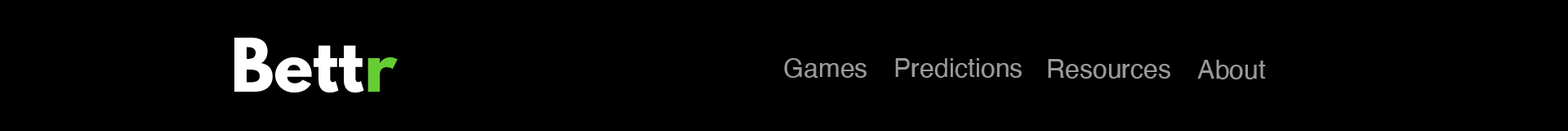
<style>
.page{position:relative;width:1568px;height:131px;background:#000000}
.page>*{position:absolute;margin:0}
.t1{font:65.3px "LeagueSpartan-Bold";color:#ffffff}
.t2{font:65.3px "LeagueSpartan-Bold";color:#66cc33}
.t3{font:26.1px "Helvetica";color:#999999}
</style>
<div class="page">
<p class="t1" style="left:234px;top:38px;width:164px;height:54px">Bett<span class="t2">r</span></p>
<p class="t3" style="left:784px;top:58px;width:82px;height:20px">Games</p>
<p class="t3" style="left:895px;top:58px;width:127px;height:20px">Predictions</p>
<p class="t3" style="left:1048px;top:59px;width:122px;height:19px">Resources</p>
<p class="t3" style="left:1197px;top:60px;width:69px;height:19px">About</p>
</div>
